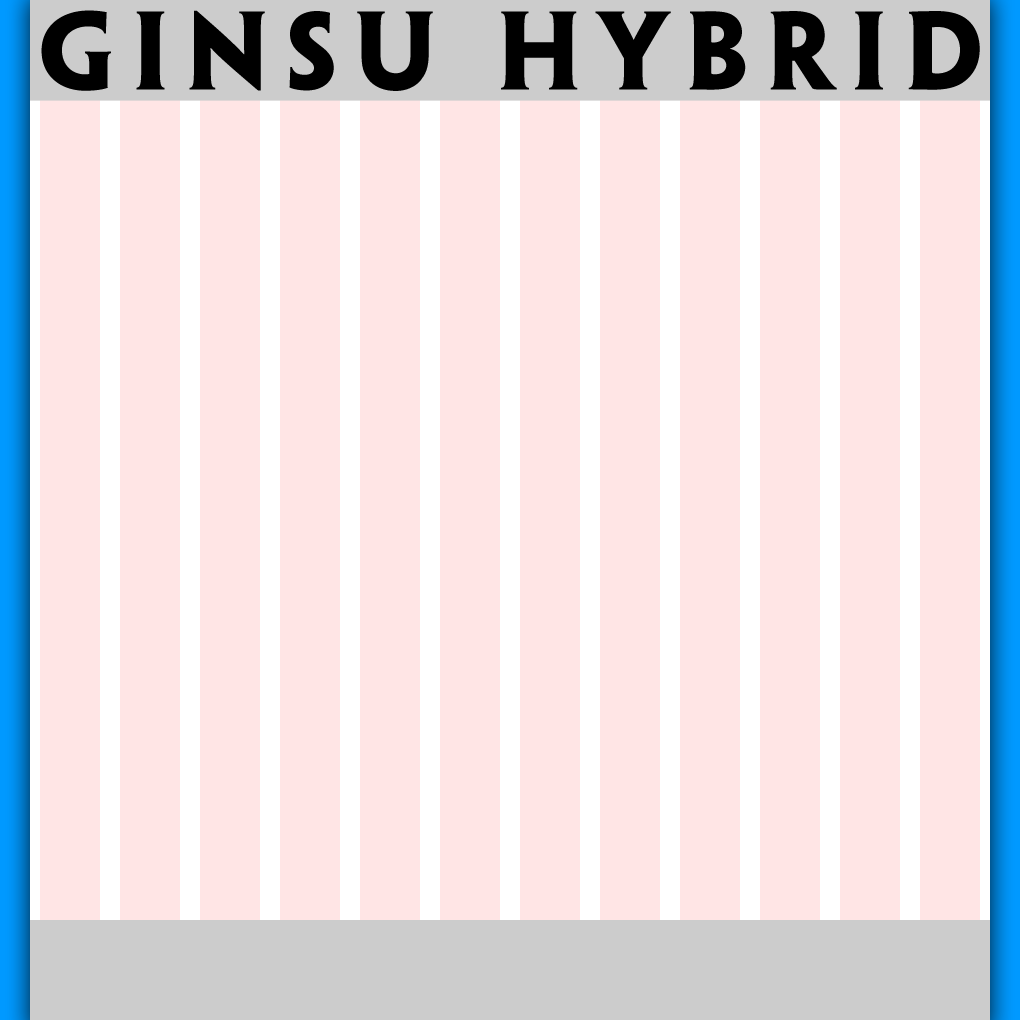
<style>
.page{position:relative;width:1020px;height:1020px;background:#ffe5e5}
.page>*{position:absolute;margin:0}
.t1{font:100px "PenumbraHalfSerifStd-Bold";letter-spacing:0.148em;color:#000000}
</style>
<div class="page">
<p class="t1" style="left:41px;top:10px;width:939px;height:81px">ginsu hybrid</p>
</div>
